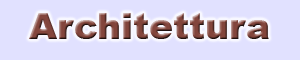
<style>
.page{position:relative;width:300px;height:60px;background:#e1e1ff}
.page>*{position:absolute;margin:0}
.t1{font:36px "Arial-Black"}
</style>
<div class="page">
<p class="t1" style="left:29px;top:13px;width:240px;height:26px">Architettura</p>
</div>
